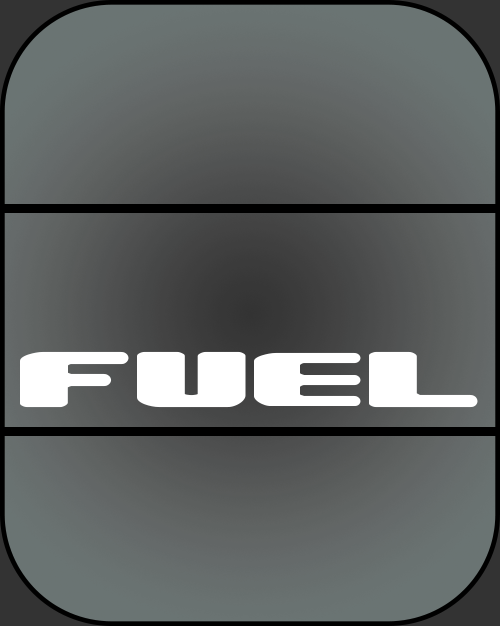
<style>
.page{position:relative;width:500px;height:626px}
.page>*{position:absolute;margin:0}
.t1{font:102.1px "UnderwhelmedBRK";color:#ffffff;font-weight:bold;scale:2.01 1}
</style>
<div class="page">
<p class="t1" style="left:20px;top:351px;width:458px;height:57px">fuel</p>
</div>
